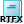
<style>
.page{position:relative;width:24px;height:24px;background:#ffffff}
.page>*{position:absolute;margin:0}
.t1{font:9px "Ubuntu-Bold";color:#000000}
</style>
<div class="page">
<p class="t1" style="left:0px;top:16px;width:23px;height:6px">RTFX</p>
</div>
